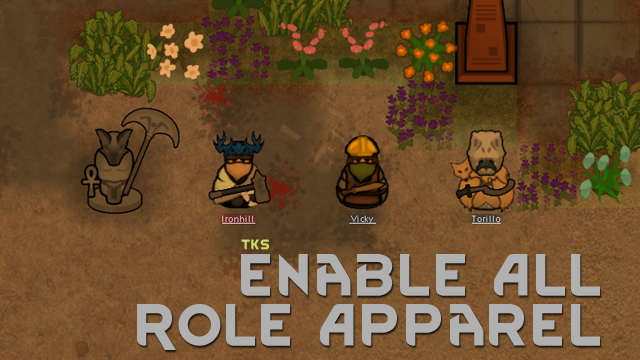
<style>
.page{position:relative;width:640px;height:360px}
.page>*{position:absolute;margin:0}
.t1{font:12px "RimWordFont";color:#cadb6a}
.t2{font:50.5px/50.1px "RimWordFont";color:#b0b0b0}
</style>
<div class="page">
<p class="t1" style="left:241px;top:239px;width:28px;height:11px">tks</p>
<p class="t2" style="left:137px;top:254px;width:463px;height:96px;text-align:right">ENable All<br>Role Apparel</p>
</div>
